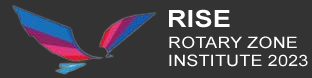
<style>
.page{position:relative;width:312px;height:78px;background:#333333}
.page>*{position:absolute;margin:0}
.t1{font:23.8px "Arial-BoldMT";letter-spacing:0.01em;color:#ffffff;scale:1.14 1}
.t2{font:15.8px "ArialMT";letter-spacing:0.01em;color:#ffffff;scale:1.14 1}
</style>
<div class="page">
<p class="t1" style="left:169px;top:9px;width:61px;height:19px">RISE</p>
<p class="t2" style="left:169px;top:36px;width:128px;height:13px">ROTARY ZONE</p>
<p class="t2" style="left:169px;top:54px;width:139px;height:13px">INSTITUTE 2023</p>
</div>
